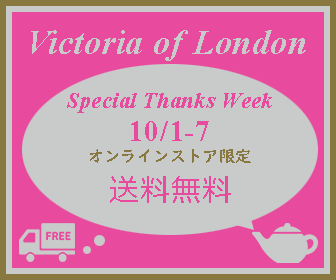
<style>
.page{position:relative;width:336px;height:280px;background:#c9caca}
.page>*{position:absolute;margin:0}
.t1{font:34px "TimesNewRomanPS-BoldItalicMT";letter-spacing:0.025em;color:#c9caca}
.t2{font:22px "TimesNewRomanPS-BoldItalicMT";letter-spacing:0.025em;color:#e84b9d}
.t3{font:30px "TimesNewRomanPS-BoldMT";letter-spacing:0.025em;color:#e84b9d}
.t4{font:16px "UDDigiKyokashoN-B";letter-spacing:0.025em;color:#88773f}
.t5{font:30px "Meiryo";letter-spacing:0.025em;color:#e84b9d}
</style>
<div class="page">
<p class="t1" style="left:31px;top:30px;width:275px;height:31px">Victoria of London</p>
<p class="t2" style="left:67px;top:93px;width:205px;height:20px">Special Thanks Week</p>
<p class="t3" style="left:131px;top:121px;width:78px;height:20px">10/1-7</p>
<p class="t4" style="left:90px;top:149px;width:161px;height:14px">オンラインストア限定</p>
<p class="t5" style="left:110px;top:176px;width:121px;height:27px">送料無料</p>
</div>
